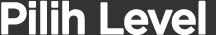
<style>
.page{position:relative;width:216px;height:35px;background:#333333}
.page>*{position:absolute;margin:0}
.t1{font:44.2px "iCielGotham-Medium";letter-spacing:-0.06em;color:#ffffff;font-weight:bold}
</style>
<div class="page">
<p class="t1" style="left:1px;top:0px;width:205px;height:35px">Pilih Level</p>
</div>
